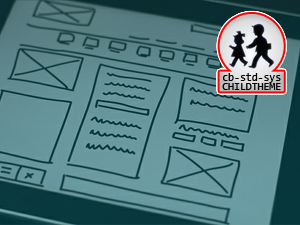
<style>
.page{position:relative;width:300px;height:225px}
.page>*{position:absolute;margin:0}
.t1{font:10.7px/9.2px "Consolas";color:#000000}
</style>
<div class="page">
<p class="t1" style="left:222px;top:73px;width:59px;height:17px;text-align:center">cb-std-sys<br>CHILDTHEME</p>
</div>
